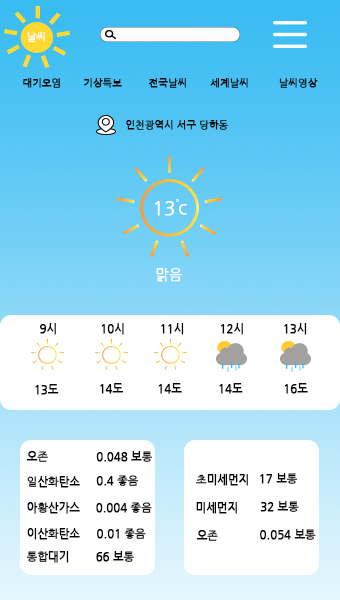
<style>
.page{position:relative;width:340px;height:600px;background:#ffffff}
.page>*{position:absolute;margin:0}
.t1{font:10px "NanumGothic";color:#fcfcfc;font-weight:bold}
.t2{font:10px "NanumGothic";color:#060606;font-weight:bold}
.t3{font:18px "NanumGothic";color:#fefefe;font-weight:bold}
.t4{font:18px "NanumGothic";color:#fcfcfc;font-weight:bold}
.t5{font:14px "NanumGothic";color:#fcfcfc;font-weight:bold}
.t6{font:11px "NanumGothic";color:#050505;font-weight:bold}
</style>
<div class="page">
<p class="t1" style="left:27px;top:32px;width:18px;height:10px">날씨</p>
<p class="t2" style="left:23px;top:78px;width:37px;height:10px">대기오염</p>
<p class="t2" style="left:84px;top:78px;width:38px;height:10px">기상특보</p>
<p class="t2" style="left:149px;top:78px;width:37px;height:10px">전국날씨</p>
<p class="t2" style="left:210px;top:78px;width:38px;height:10px">세계날씨</p>
<p class="t2" style="left:279px;top:78px;width:39px;height:10px">날씨영상</p>
<p class="t2" style="left:126px;top:120px;width:102px;height:10px">인천광역시 서구 당하동</p>
<p class="t3" style="left:155px;top:201px;width:19px;height:15px">13</p>
<p class="t4" style="left:178px;top:204px;width:9px;height:11px">c</p>
<p class="t5" style="left:156px;top:267px;width:26px;height:15px">맑음</p>
<p class="t6" style="left:40px;top:323px;width:16px;height:12px">9시</p>
<p class="t6" style="left:101px;top:323px;width:23px;height:12px">10시</p>
<p class="t6" style="left:161px;top:323px;width:23px;height:12px">11시</p>
<p class="t6" style="left:221px;top:323px;width:22px;height:12px">12시</p>
<p class="t6" style="left:284px;top:323px;width:23px;height:12px">13시</p>
<p class="t6" style="left:35px;top:384px;width:24px;height:11px">13도</p>
<p class="t6" style="left:100px;top:383px;width:23px;height:11px">14도</p>
<p class="t6" style="left:158px;top:383px;width:24px;height:11px">14도</p>
<p class="t6" style="left:219px;top:383px;width:24px;height:11px">14도</p>
<p class="t6" style="left:284px;top:383px;width:24px;height:11px">16도</p>
<p class="t6" style="left:27px;top:451px;width:21px;height:11px">오존</p>
<p class="t6" style="left:96px;top:451px;width:57px;height:11px">0.048 보통</p>
<p class="t6" style="left:260px;top:473px;width:38px;height:11px">17 보통</p>
<p class="t6" style="left:27px;top:476px;width:53px;height:12px">일산화탄소</p>
<p class="t6" style="left:96px;top:475px;width:43px;height:11px">0.4 좋음</p>
<p class="t6" style="left:196px;top:474px;width:52px;height:12px">초미세먼지</p>
<p class="t6" style="left:27px;top:502px;width:53px;height:12px">아황산가스</p>
<p class="t6" style="left:96px;top:502px;width:56px;height:11px">0.004 좋음</p>
<p class="t6" style="left:196px;top:502px;width:41px;height:12px">미세먼지</p>
<p class="t6" style="left:260px;top:501px;width:39px;height:11px">32 보통</p>
<p class="t6" style="left:27px;top:528px;width:53px;height:12px">이산화탄소</p>
<p class="t6" style="left:97px;top:528px;width:49px;height:11px">0.01 좋음</p>
<p class="t6" style="left:197px;top:530px;width:21px;height:11px">오존</p>
<p class="t6" style="left:260px;top:529px;width:56px;height:11px">0.054 보통</p>
<p class="t6" style="left:26px;top:551px;width:43px;height:12px">통합대기</p>
<p class="t6" style="left:96px;top:551px;width:38px;height:11px">66 보통</p>
</div>
